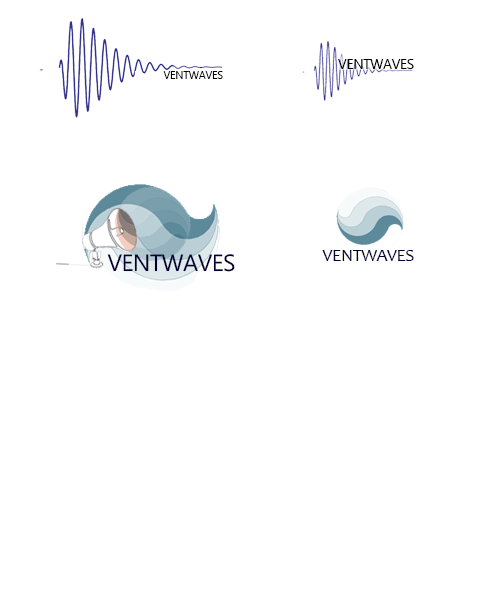
<style>
.page{position:relative;width:500px;height:600px;background:#ffffff}
.page>*{position:absolute;margin:0}
.t1{font:14px "Ebrima";letter-spacing:-0.025em;color:#000000}
.t2{font:11px "Ebrima";letter-spacing:-0.025em;color:#ffffff}
.t3{font:11px "Ebrima";letter-spacing:-0.025em;color:#000000}
.t4{font:23.5px "Ebrima";letter-spacing:-0.025em;color:#000033}
.t5{font:18px "Candara";letter-spacing:-0.025em;color:#000033}
</style>
<div class="page">
<p class="t1" style="left:338px;top:59px;width:108px;height:13px">VENTWAVES <span class="t2">Ipsum</span></p>
<p class="t3" style="left:134px;top:71px;width:120px;height:11px"><span class="t2">Lorem</span>VENTWAVES<span class="t2"> Ipsum</span></p>
<p class="t4" style="left:107px;top:254px;width:128px;height:18px">VENTWAVES</p>
<p class="t5" style="left:322px;top:250px;width:92px;height:11px">VENTWAVES</p>
</div>
